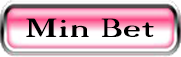
<style>
.page{position:relative;width:181px;height:57px}
.page>*{position:absolute;margin:0}
.t1{font:36.1px "18thCentury";color:#000000;scale:1.36 1}
</style>
<div class="page">
<p class="t1" style="left:26px;top:18px;width:128px;height:19px">Min Bet</p>
</div>
